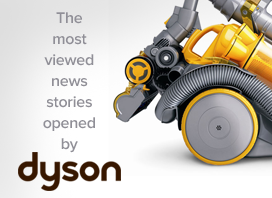
<style>
.page{position:relative;width:272px;height:198px}
.page>*{position:absolute;margin:0}
.t1{font:16px/21px "ProximaNova-Semibold";letter-spacing:-0.015em;color:#908f97}
</style>
<div class="page">
<p class="t1" style="left:43px;top:12px;width:52px;height:141px;text-align:center">The<br>most<br>viewed<br>news<br>stories<br>opened<br>by</p>
</div>
